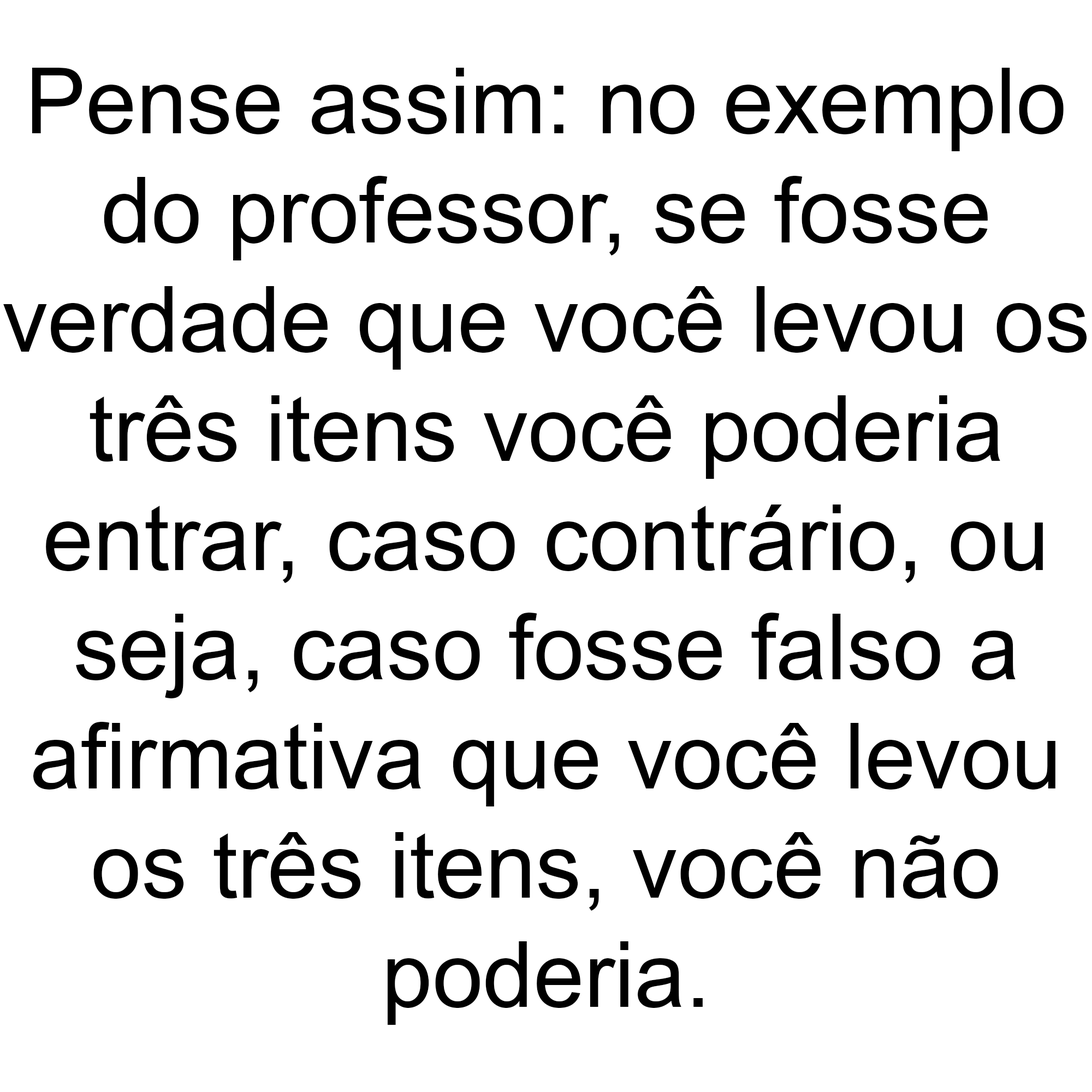
<style>
.page{position:relative;width:1092px;height:1092px;background:#ffffff}
.page>*{position:absolute;margin:0}
.t1{font:91px "ArialMT";color:#000000}
</style>
<div class="page">
<p class="t1" style="left:3px;top:68px;width:1084px;height:957px;text-align:center">Pense assim: no exemplo<br>do professor, se fosse<br>verdade que você levou os<br>três itens você poderia<br>entrar, caso contrário, ou<br>seja, caso fosse falso a<br>afirmativa que você levou<br>os três itens, você não<br>poderia.</p>
</div>
